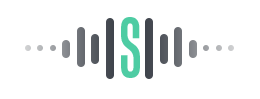
<style>
.page{position:relative;width:260px;height:99px;background:#ffffff}
.page>*{position:absolute;margin:0}
.t1{font:76.7px "TandelleRg-Regular";color:#4ecca3;text-transform:uppercase}
</style>
<div class="page">
<p class="t1" style="left:121px;top:17px;width:19px;height:61px">S</p>
</div>
